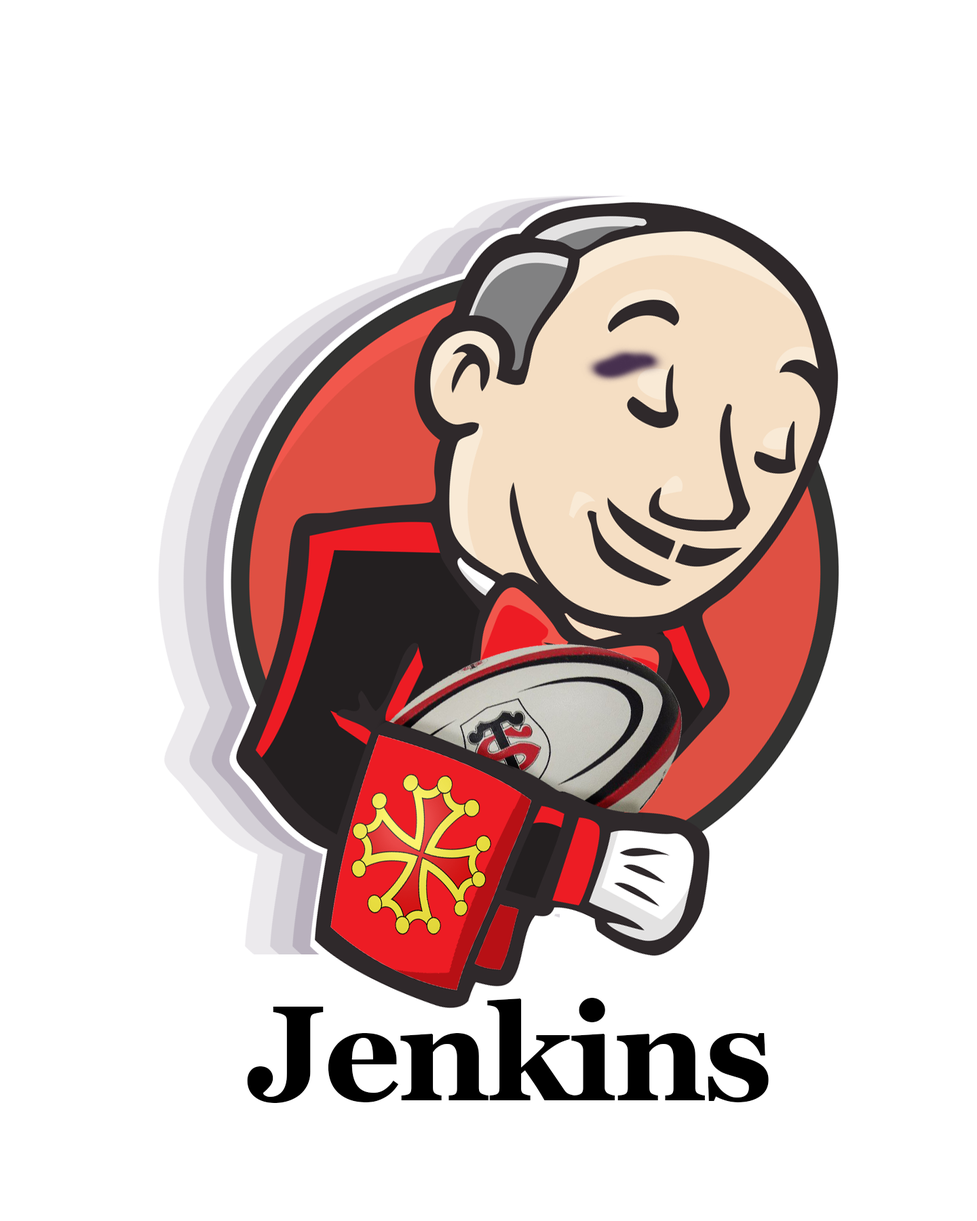
<style>
.page{position:relative;width:977px;height:1221px;background:#ffffff}
.page>*{position:absolute;margin:0}
.t1{font:135.1px "Georgia-Bold";letter-spacing:-0.025em;color:#000000}
</style>
<div class="page">
<p class="t1" style="left:247px;top:998px;width:521px;height:105px">Jenkins</p>
</div>
